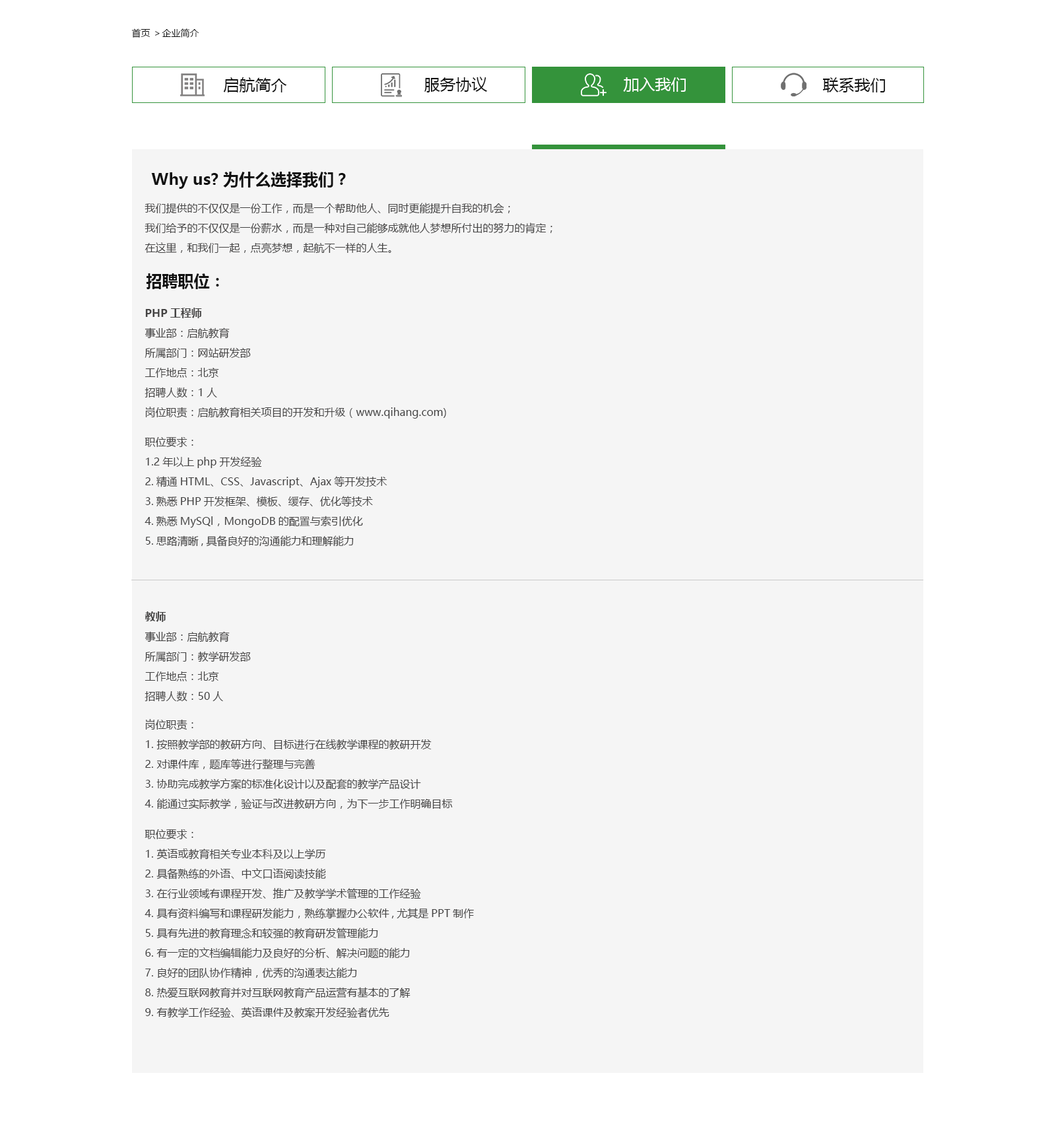
<style>
.page{position:relative;width:1056px;height:1129px;background:#f5f5f5}
.page>*{position:absolute;margin:0}
.t1{font:9.2px "MicrosoftYaHei";color:#111111}
.t2{font:15.8px "MicrosoftYaHei";color:#111111}
.t3{font:15.8px "MicrosoftYaHei";color:#ffffff}
.t4{font:15.8px "MicrosoftYaHei-Bold";color:#111111}
.t5{font:10.6px/19.8px "MicrosoftYaHei";color:#444343}
.t6{font:10.6px/19.8px "MicrosoftYaHei-Bold";color:#444343}
</style>
<div class="page">
<p class="t1" style="left:131px;top:28px;width:68px;height:10px">首页 ＞企业简介</p>
<p class="t2" style="left:223px;top:77px;width:64px;height:15px">启航简介</p>
<p class="t2" style="left:424px;top:77px;width:63px;height:15px">服务协议</p>
<p class="t3" style="left:623px;top:77px;width:63px;height:15px">加入我们</p>
<p class="t2" style="left:823px;top:77px;width:62px;height:15px">联系我们</p>
<p class="t4" style="left:151px;top:172px;width:195px;height:17px">Why us? 为什么选择我们？</p>
<p class="t5" style="left:145px;top:203px;width:408px;height:51px">我们提供的不仅仅是一份工作，而是一个帮助他人、同时更能提升自我的机会；<br>我们给予的不仅仅是一份薪水，而是一种对自己能够成就他人梦想所付出的努力的肯定；<br>在这里，和我们一起，点亮梦想，起航不一样的人生。</p>
<p class="t4" style="left:146px;top:273px;width:73px;height:16px">招聘职位：</p>
<p class="t5" style="left:145px;top:308px;width:301px;height:111px"><span class="t6">PHP工程师<br></span>事业部：启航教育<br>所属部门：网站研发部<br>工作地点：北京<br>招聘人数：1人<br>岗位职责：启航教育相关项目的开发和升级（www.qihang.com)</p>
<p class="t5" style="left:145px;top:437px;width:243px;height:110px">职位要求：<br>1.2年以上php开发经验<br>2.精通HTML、CSS、Javascript、Ajax等开发技术<br>3.熟悉PHP开发框架、模板、缓存、优化等技术<br>4.熟悉MySQl，MongoDB的配置与索引优化<br>5.思路清晰,具备良好的沟通能力和理解能力<br>6.工作积极主动,具有强烈的责任心</p>
<p class="t5" style="left:145px;top:611px;width:106px;height:91px"><span class="t6">教师<br></span>事业部：启航教育<br>所属部门：教学研发部<br>工作地点：北京<br>招聘人数：50人</p>
<p class="t5" style="left:145px;top:719px;width:308px;height:90px">岗位职责：<br>1. 按照教学部的教研方向、目标进行在线教学课程的教研开发<br>2. 对课件库，题库等进行整理与完善<br>3. 协助完成教学方案的标准化设计以及配套的教学产品设计<br>4. 能通过实际教学，验证与改进教研方向，为下一步工作明确目标<br>5. 能对教学内容进行组织和英汉互译<br>6. 协助新方案、预研产品的推广工作</p>
<p class="t5" style="left:145px;top:829px;width:329px;height:189px">职位要求：<br>1. 英语或教育相关专业本科及以上学历<br>2. 具备熟练的外语、中文口语阅读技能<br>3. 在行业领域有课程开发、推广及教学学术管理的工作经验<br>4. 具有资料编写和课程研发能力，熟练掌握办公软件,尤其是PPT制作<br>5. 具有先进的教育理念和较强的教育研发管理能力<br>6. 有一定的文档编辑能力及良好的分析、解决问题的能力<br>7. 良好的团队协作精神，优秀的沟通表达能力<br>8. 热爱互联网教育并对互联网教育产品运营有基本的了解<br>9. 有教学工作经验、英语课件及教案开发经验者优先</p>
</div>
